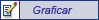
<style>
.page{position:relative;width:99px;height:20px;background:#cfd3df}
.page>*{position:absolute;margin:0}
.t1{font:11px "Arial-ItalicMT";color:#333399}
</style>
<div class="page">
<p class="t1" style="left:33px;top:6px;width:40px;height:8px">Graficar</p>
</div>
